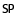
<style>
.page{position:relative;width:16px;height:16px;background:#ffffff}
.page>*{position:absolute;margin:0}
.t1{font:12px "MyriadPro-Regular";color:#000000}
</style>
<div class="page">
<p class="t1" style="left:2px;top:4px;width:12px;height:9px">SP</p>
</div>
